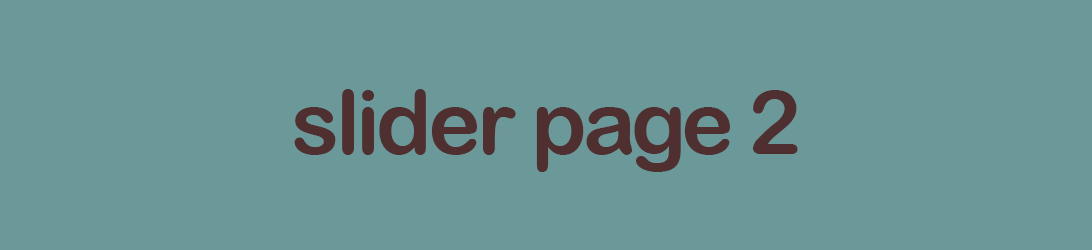
<style>
.page{position:relative;width:1092px;height:250px;background:#6b9999}
.page>*{position:absolute;margin:0}
.t1{font:88.6px "ArialRoundedMTBold";letter-spacing:-0.04em;color:#4f2f2f}
</style>
<div class="page">
<p class="t1" style="left:294px;top:89px;width:504px;height:83px">slider page 2</p>
</div>
